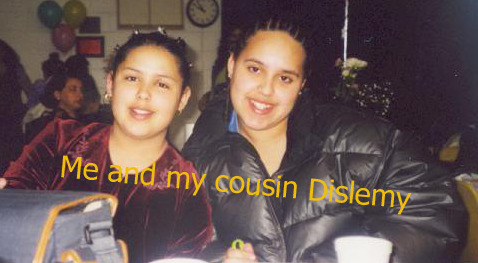
<style>
.page{position:relative;width:478px;height:263px}
.page>*{position:absolute;margin:0}
.t1{font:30px "Tahoma";color:#efbd0d}
</style>
<div class="page">
<p class="t1" style="left:61px;top:155px;width:351px;height:60px;rotate:5deg">Me and my cousin Dislemy</p>
</div>
